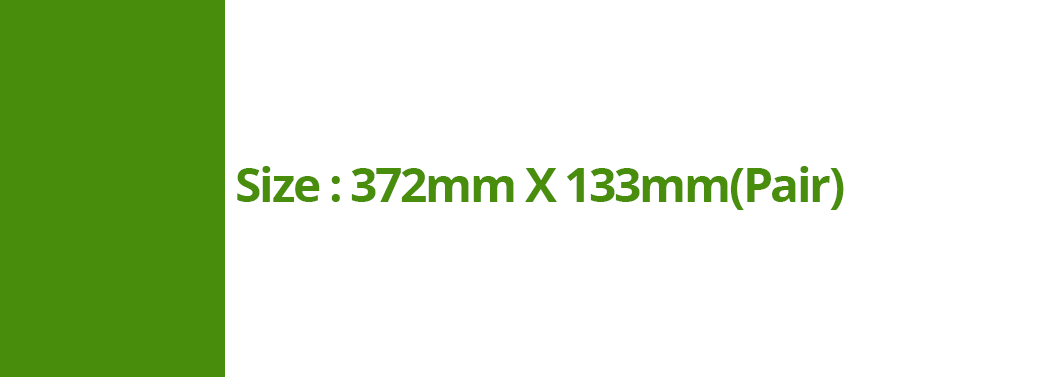
<style>
.page{position:relative;width:1054px;height:377px;background:#ffffff}
.page>*{position:absolute;margin:0}
.t1{font:48px "OpenSans-Bold";letter-spacing:-0.05em;color:#498d0d}
</style>
<div class="page">
<p class="t1" style="left:237px;top:166px;width:607px;height:44px">Size : 372mm X 133mm(Pair)</p>
</div>
